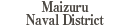
<style>
.page{position:relative;width:130px;height:27px;background:#ffffff}
.page>*{position:absolute;margin:0}
.t1{font:14px/13px "RyuminPro-ExBold";letter-spacing:-0.04em;color:#4c4843;scale:0.9 1}
</style>
<div class="page">
<p class="t1" style="left:26px;top:1px;width:78px;height:25px;text-align:center">Maizuru<br>Naval District</p>
</div>
